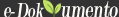
<style>
.page{position:relative;width:119px;height:17px;background:#333333}
.page>*{position:absolute;margin:0}
.t1{font:22px "Modern-Regular";color:#fcfbf7;font-style:italic;scale:0.73 1}
.t2{font:24px "Modern-Regular";color:#fcfbf7;font-style:italic;scale:0.73 1}
.t3{font:26px "Modern-Regular";color:#fcfbf7;font-style:italic;scale:0.73 1}
</style>
<div class="page">
<p class="t1" style="left:4px;top:2px;width:41px;height:16px"><span class="t2">e</span>-Dok</p>
<p class="t3" style="left:61px;top:1px;width:57px;height:17px">umento</p>
</div>
